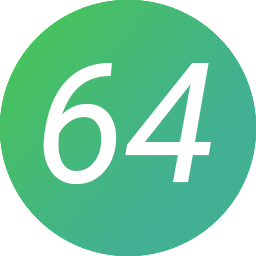
<style>
.page{position:relative;width:256px;height:256px;background:#ffffff}
.page>*{position:absolute;margin:0}
.t1{font:166.7px "Roboto-Italic";color:#ffffff}
</style>
<div class="page">
<p class="t1" style="left:43px;top:63px;width:168px;height:122px">64</p>
</div>
